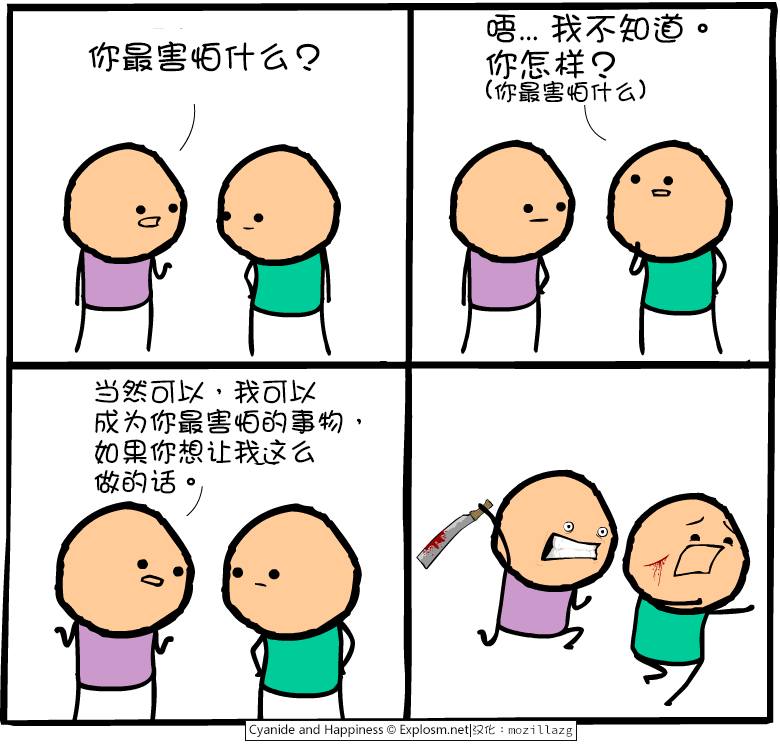
<style>
.page{position:relative;width:780px;height:745px;background:#ffffff}
.page>*{position:absolute;margin:0}
.t1{font:34px/36px "DFGirl";color:#000000}
.t2{font:34px/24px "DFGirl";color:#000000}
.t3{font:24px/24px "DFGirl";color:#000000}
.t4{font:34px "DFGirl";color:#000000}
.t5{font:28px/30px "DFGirl";color:#000000}
</style>
<div class="page">
<p class="t1" style="left:486px;top:13px;width:222px;height:90px">唔... 我不知道。<br><span class="t2">你怎样？<br>(</span><span class="t3">你最害怕什么</span>)</p>
<p class="t4" style="left:88px;top:41px;width:232px;height:31px">你最害怕什么？</p>
<p class="t5" style="left:94px;top:379px;width:267px;height:115px">当然可以，我可以<br>成为你最害怕的事物，<br>如果你想让我这么<br>做的话。</p>
</div>
